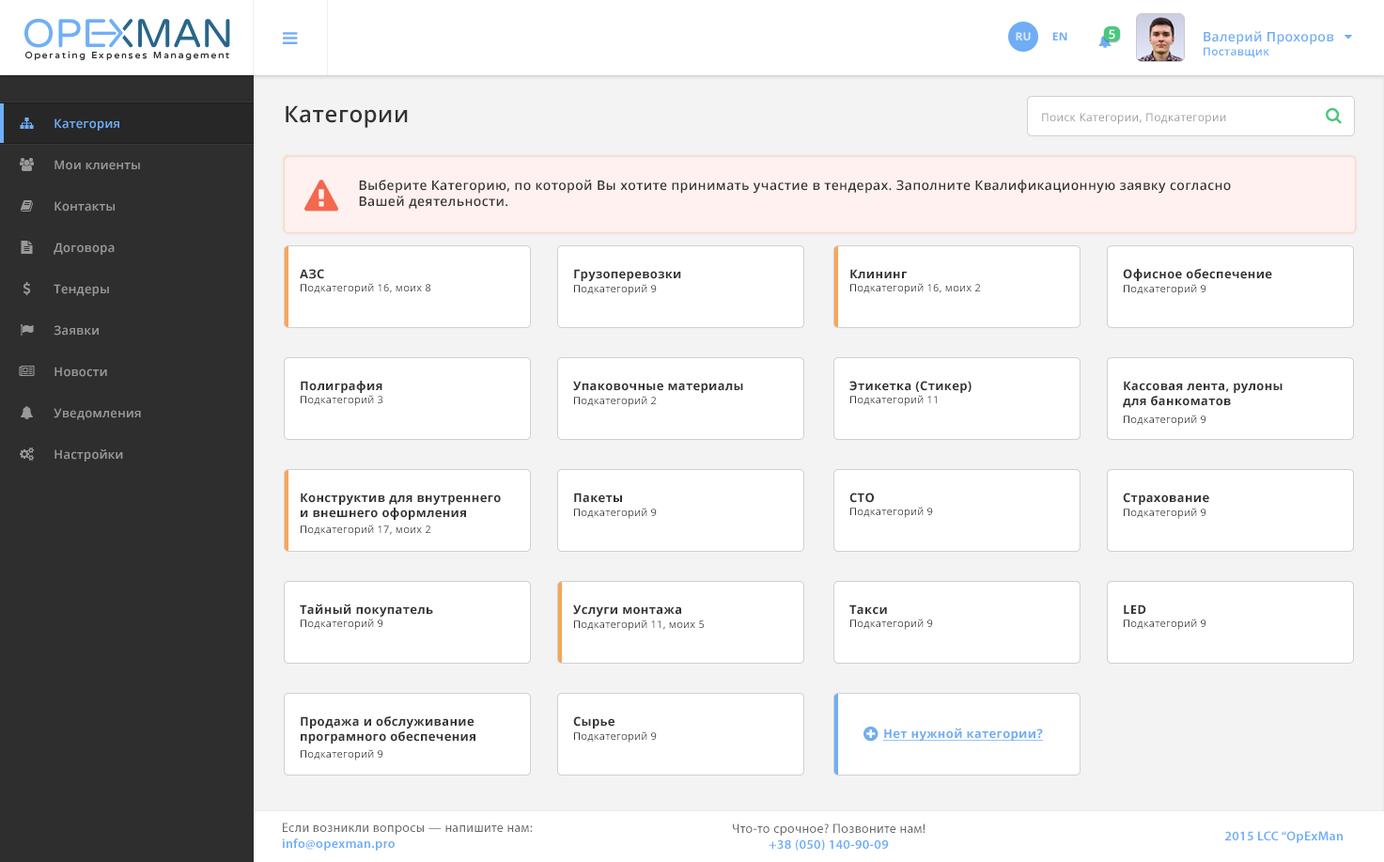
<style>
.page{position:relative;width:1384px;height:862px;background:#ffffff}
.page>*{position:absolute;margin:0}
.t1{font:12.2px "OpenSans-Semibold";letter-spacing:0.025em;color:#ffffff}
.t2{font:11.3px "OpenSans-Bold";letter-spacing:0.025em;color:#dbe8fc;text-transform:uppercase}
.t3{font:11.3px "OpenSans-Bold";letter-spacing:0.025em;color:#6faff8;text-transform:uppercase}
.t4{font:13.1px "OpenSans-Semibold";letter-spacing:0.025em;color:#6eaef7}
.t5{font:11.3px "OpenSans-Semibold";letter-spacing:0.025em;color:#6eaef7}
.t6{font:22.5px "OpenSans-Semibold";letter-spacing:0.025em;color:#333333}
.t7{font:11.3px "OpenSans";letter-spacing:0.025em;color:#999999}
.t8{font:12.2px "OpenSans-Semibold";letter-spacing:0.025em;color:#70adf5}
.t9{font:12.2px "OpenSans-Semibold";letter-spacing:0.025em;color:#999999}
.t10{font:13.2px "OpenSans-Semibold";letter-spacing:0.025em;color:#333333}
.t11{font:12.2px "OpenSans-Bold";letter-spacing:0.025em;color:#333333}
.t12{font:10.3px "OpenSans";letter-spacing:0.025em;color:#333333}
.t13{font:12.2px "OpenSans-Bold";letter-spacing:0.025em;color:#70adf5;text-decoration:underline}
.t14{font:13.1px "MyriadPro-Regular";letter-spacing:0.025em;color:#696969}
.t15{font:13.1px "MyriadPro-Semibold";letter-spacing:0.025em;color:#6eaef8}
</style>
<div class="page">
<p class="t1" style="left:1109px;top:29px;width:6px;height:10px">5</p>
<p class="t2" style="left:1016px;top:32px;width:15px;height:8px">Ru</p>
<p class="t3" style="left:1052px;top:32px;width:15px;height:8px">EN</p>
<p class="t4" style="left:1204px;top:31px;width:130px;height:27px">Валерий Прохоров<br><span class="t5">Поставщик</span></p>
<p class="t6" style="left:286px;top:105px;width:122px;height:23px">Категории</p>
<p class="t7" style="left:1042px;top:113px;width:184px;height:11px">Поиск Категории, Подкатегории</p>
<p class="t8" style="left:54px;top:118px;width:65px;height:13px">Категория</p>
<p class="t9" style="left:54px;top:160px;width:86px;height:10px">Мои клиенты</p>
<p class="t10" style="left:359px;top:179px;width:872px;height:30px">Выберите Категорию, по которой Вы хотите принимать участие в тендерах. Заполните Квалификационную заявку согласно Вашей деятельности.</p>
<p class="t9" style="left:54px;top:201px;width:61px;height:10px">Контакты</p>
<p class="t9" style="left:54px;top:242px;width:61px;height:13px">Договора</p>
<p class="t11" style="left:300px;top:269px;width:24px;height:10px">АЗС</p>
<p class="t11" style="left:574px;top:269px;width:107px;height:12px">Грузоперевозки</p>
<p class="t11" style="left:850px;top:269px;width:57px;height:10px">Клининг</p>
<p class="t11" style="left:1123px;top:269px;width:149px;height:12px">Офисное обеспечение</p>
<p class="t9" style="left:54px;top:284px;width:55px;height:12px">Тендеры</p>
<p class="t12" style="left:301px;top:283px;width:130px;height:11px">Подкатегорий 16, моих 8</p>
<p class="t12" style="left:574px;top:284px;width:83px;height:11px">Подкатегорий 9</p>
<p class="t12" style="left:850px;top:283px;width:131px;height:11px">Подкатегорий 16, моих 2</p>
<p class="t12" style="left:1124px;top:284px;width:82px;height:11px">Подкатегорий 9</p>
<p class="t9" style="left:54px;top:325px;width:45px;height:10px">Заявки</p>
<p class="t9" style="left:54px;top:366px;width:53px;height:11px">Новости</p>
<p class="t11" style="left:301px;top:381px;width:81px;height:12px">Полиграфия</p>
<p class="t11" style="left:573px;top:381px;width:170px;height:12px">Упаковочные материалы</p>
<p class="t11" style="left:849px;top:381px;width:123px;height:12px">Этикетка (Стикер)</p>
<p class="t11" style="left:1123px;top:381px;width:160px;height:27px">Кассовая лента, рулоны <br>для банкоматов</p>
<p class="t12" style="left:301px;top:395px;width:81px;height:11px">Подкатегорий 3</p>
<p class="t12" style="left:574px;top:396px;width:83px;height:11px">Подкатегорий 2</p>
<p class="t12" style="left:850px;top:395px;width:87px;height:11px">Подкатегорий 11</p>
<p class="t9" style="left:54px;top:408px;width:87px;height:12px">Уведомления</p>
<p class="t12" style="left:1124px;top:414px;width:82px;height:12px">Подкатегорий 9</p>
<p class="t9" style="left:54px;top:449px;width:69px;height:12px">Настройки</p>
<p class="t11" style="left:301px;top:492px;width:200px;height:28px">Конструктив для внутреннего <br>и внешнего оформления</p>
<p class="t11" style="left:574px;top:492px;width:48px;height:11px">Пакеты</p>
<p class="t11" style="left:849px;top:492px;width:25px;height:11px">СТО</p>
<p class="t11" style="left:1123px;top:492px;width:86px;height:13px">Страхование</p>
<p class="t12" style="left:574px;top:507px;width:83px;height:12px">Подкатегорий 9</p>
<p class="t12" style="left:850px;top:506px;width:83px;height:12px">Подкатегорий 9</p>
<p class="t12" style="left:1124px;top:507px;width:82px;height:12px">Подкатегорий 9</p>
<p class="t12" style="left:301px;top:524px;width:130px;height:12px">Подкатегорий 17, моих 2</p>
<p class="t11" style="left:300px;top:603px;width:133px;height:13px">Тайный покупатель</p>
<p class="t11" style="left:573px;top:604px;width:108px;height:12px">Услуги монтажа</p>
<p class="t11" style="left:849px;top:604px;width:38px;height:10px">Такси</p>
<p class="t11" style="left:1124px;top:604px;width:22px;height:10px">LED</p>
<p class="t12" style="left:301px;top:618px;width:82px;height:12px">Подкатегорий 9</p>
<p class="t12" style="left:574px;top:619px;width:130px;height:11px">Подкатегорий 11, моих 5</p>
<p class="t12" style="left:850px;top:618px;width:83px;height:12px">Подкатегорий 9</p>
<p class="t12" style="left:1124px;top:618px;width:82px;height:12px">Подкатегорий 9</p>
<p class="t11" style="left:301px;top:716px;width:174px;height:27px">Продажа и обслуживание <br>програмного обеспечения</p>
<p class="t11" style="left:573px;top:716px;width:41px;height:12px">Сырье</p>
<p class="t12" style="left:574px;top:731px;width:83px;height:11px">Подкатегорий 9</p>
<p class="t13" style="left:883px;top:727px;width:160px;height:13px">Нет нужной категории?</p>
<p class="t12" style="left:301px;top:749px;width:82px;height:11px">Подкатегорий 9</p>
<p class="t14" style="left:282px;top:822px;width:251px;height:28px">Если возникли вопросы — напишите нам:<br><span class="t15">info@opexman.pro</span></p>
<p class="t14" style="left:733px;top:823px;width:192px;height:27px;text-align:center">Что-то срочное? Позвоните нам!<br><span class="t15">+38 (050) 140-90-09</span></p>
<p class="t15" style="left:1225px;top:831px;width:118px;height:12px">2015 LCC “OpExMan</p>
</div>
